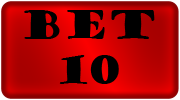
<style>
.page{position:relative;width:180px;height:100px}
.page>*{position:absolute;margin:0}
.t1{font:37.5px "GoudyStout";color:#000000}
</style>
<div class="page">
<p class="t1" style="left:24px;top:10px;width:131px;height:74px;text-align:center">bet<br>10</p>
</div>
